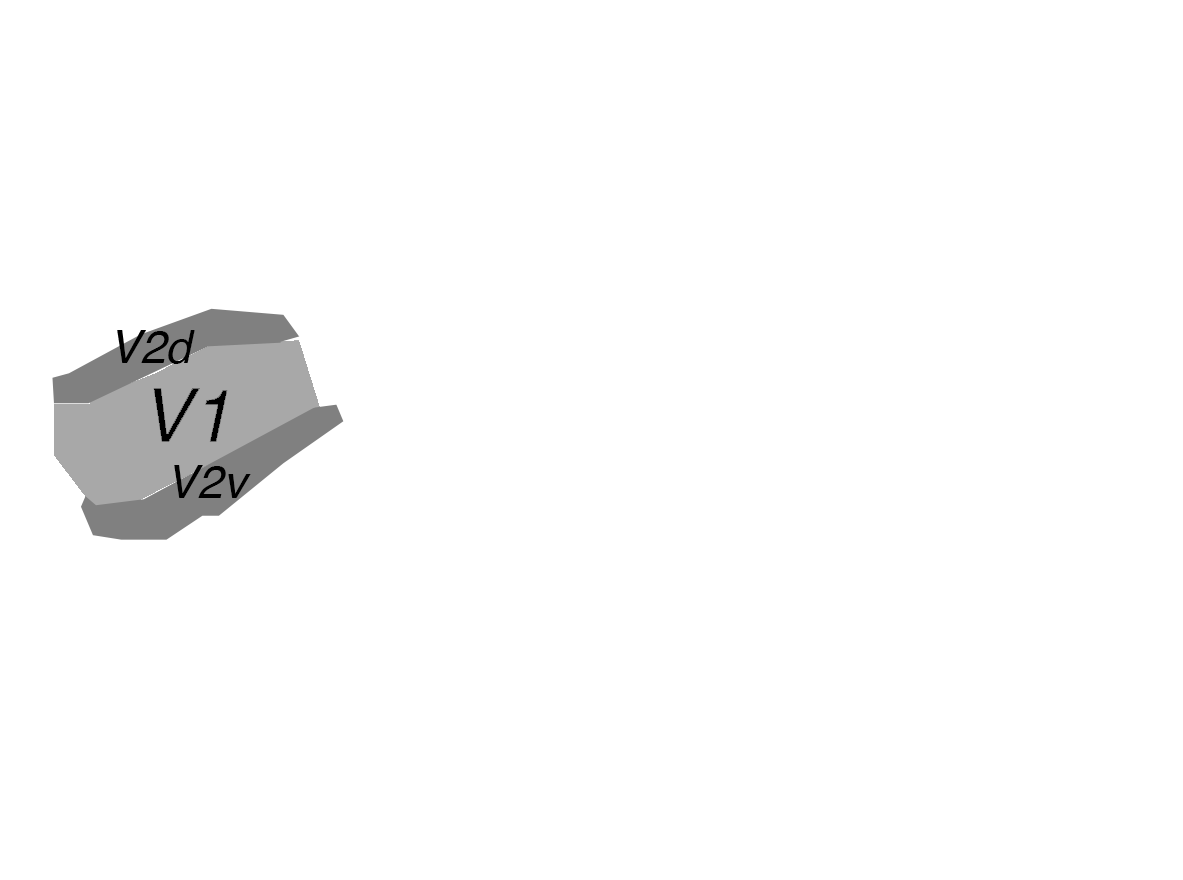
<style>
.page{position:relative;width:1183px;height:880px;background:#ffffff}
.page>*{position:absolute;margin:0}
.t1{font:45.8px "Helvetica-Oblique";color:#000000}
.t2{font:46px "Helvetica-Oblique";color:#000000}
</style>
<div class="page">
<p class="t1" style="left:117px;top:330px;width:78px;height:34px">V2d</p>
<p class="t2" style="left:174px;top:465px;width:77px;height:33px">V2v</p>
</div>
